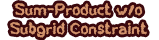
<style>
.page{position:relative;width:159px;height:40px;background:#ffffff}
.page>*{position:absolute;margin:0}
.t1{font:16px "TOBACCO";color:#c4845a;font-weight:bold}
</style>
<div class="page">
<p class="t1" style="left:10px;top:3px;width:137px;height:35px;text-align:center">Sum-Product w/o<br>Subgrid Constraint</p>
</div>
